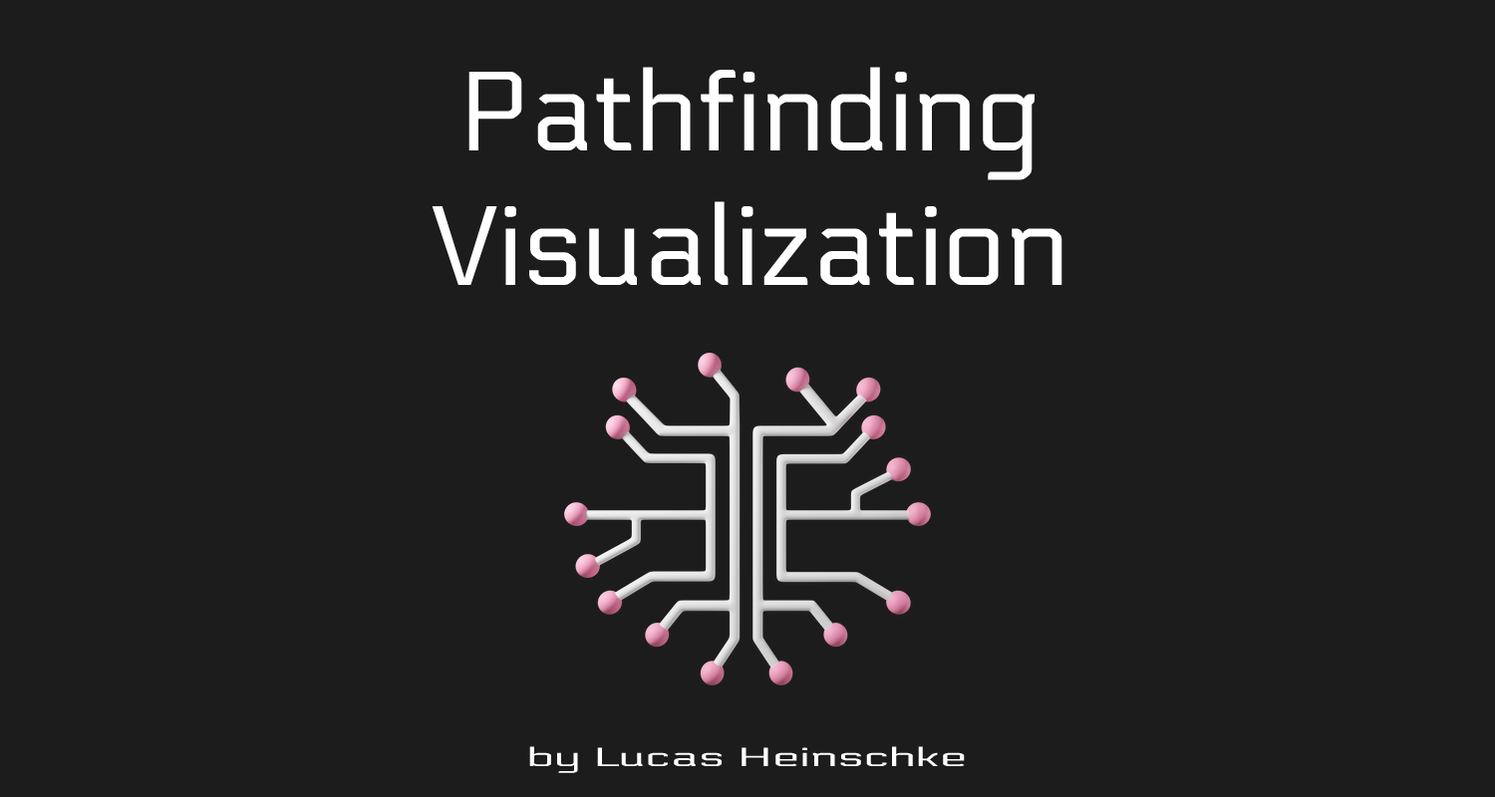
<style>
.page{position:relative;width:1495px;height:797px;background:#1c1c1c}
.page>*{position:absolute;margin:0}
.t1{font:112.6px "Electrolize-Regular";color:#ffffff}
.t2{font:26.2px "Electrolize-Regular";color:#ffffff;scale:1.87 1}
</style>
<div class="page">
<p class="t1" style="left:432px;top:67px;width:631px;height:218px;text-align:center">Pathfinding Visualization</p>
<p class="t2" style="left:529px;top:747px;width:436px;height:27px">by Lucas Heinschke</p>
</div>
